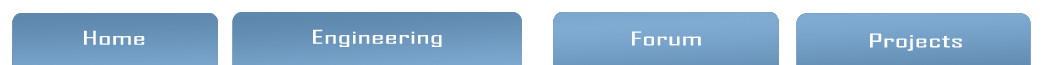
<style>
.page{position:relative;width:1049px;height:65px;background:#ffffff}
.page>*{position:absolute;margin:0}
.t1{font:18px "AgencyFB-Reg";color:#ffffff;scale:2 1}
</style>
<div class="page">
<p class="t1" style="left:84px;top:30px;width:61px;height:15px">Home</p>
<p class="t1" style="left:313px;top:29px;width:129px;height:18px">Engineering</p>
<p class="t1" style="left:632px;top:31px;width:69px;height:15px">Forum</p>
<p class="t1" style="left:870px;top:33px;width:92px;height:18px">Projects</p>
</div>
